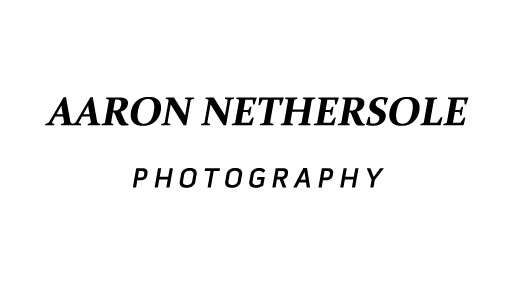
<style>
.page{position:relative;width:512px;height:300px;background:#ffffff}
.page>*{position:absolute;margin:0}
.t1{font:28px "PillGothic600mg-Semibd";color:#000000;font-style:italic}
.t2{font:40px "Constantia-Bold";color:#000000;font-style:italic}
</style>
<div class="page">
<p class="t1" style="left:45px;top:97px;width:424px;height:91px;text-align:center"><span class="t2">AARON NETHERSOLE<br><br></span>P H O T O G R A P H Y</p>
</div>
